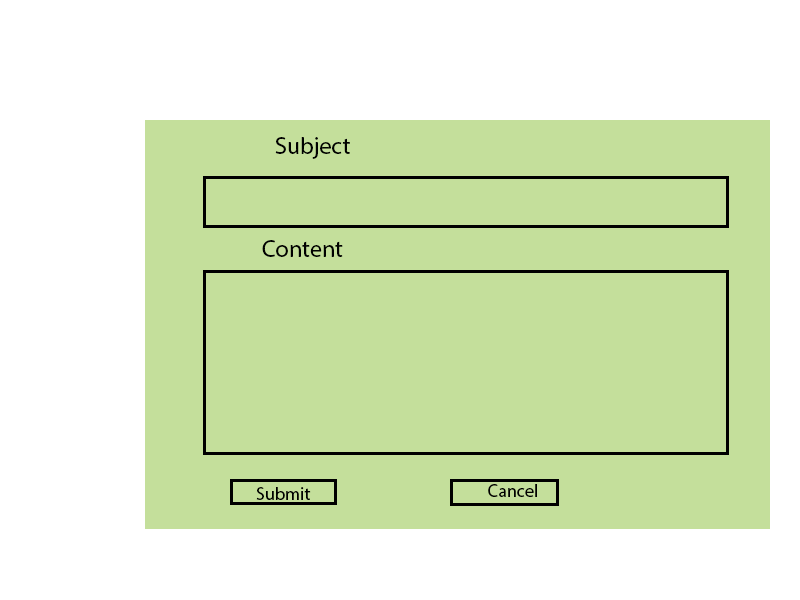
<style>
.page{position:relative;width:800px;height:600px;background:#c4df9b}
.page>*{position:absolute;margin:0}
.t1{font:24px "MyriadPro-Regular";color:#000000}
.t2{font:18px "MyriadPro-Regular";color:#000000}
</style>
<div class="page">
<p class="t1" style="left:275px;top:137px;width:75px;height:22px">Subject</p>
<p class="t1" style="left:262px;top:240px;width:81px;height:17px">Content</p>
<p class="t2" style="left:488px;top:484px;width:49px;height:13px">Cancel</p>
<p class="t2" style="left:256px;top:487px;width:55px;height:13px">Submit</p>
</div>
